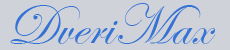
<style>
.page{position:relative;width:230px;height:50px;background:#cfd2d8}
.page>*{position:absolute;margin:0}
.t1{font:58.3px "EdwardianScriptITC";color:#3572d6}
</style>
<div class="page">
<p class="t1" style="left:10px;top:3px;width:206px;height:41px">DveriMax</p>
</div>
